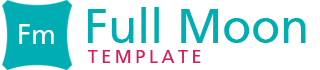
<style>
.page{position:relative;width:320px;height:70px;background:#ffffff}
.page>*{position:absolute;margin:0}
.t1{font:48px "FrutigerLT-Roman";color:#00adb3}
.t2{font:28px "FrutigerLT-Roman";color:#ffffff}
.t3{font:18px "FrutigerLT-Roman";letter-spacing:0.2em;color:#d51d5b}
</style>
<div class="page">
<p class="t1" style="left:88px;top:7px;width:218px;height:36px">Full Moon</p>
<p class="t2" style="left:19px;top:24px;width:35px;height:20px">Fm</p>
<p class="t3" style="left:87px;top:50px;width:114px;height:13px">TEMPLATE</p>
</div>
